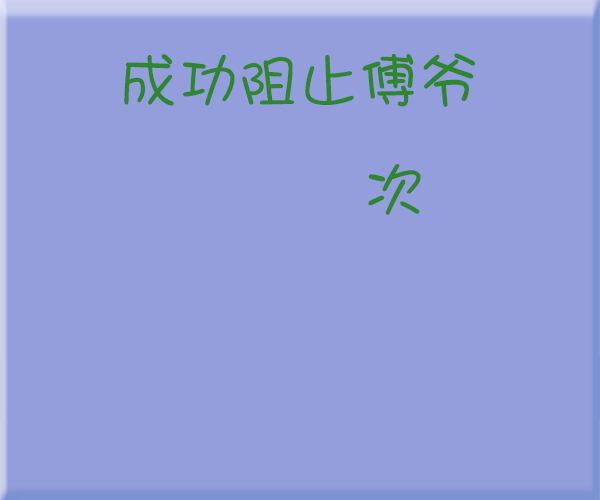
<style>
.page{position:relative;width:600px;height:500px;background:#949edc}
.page>*{position:absolute;margin:0}
.t1{font:60px "DroidSans";color:#308530}
</style>
<div class="page">
<p class="t1" style="left:124px;top:53px;width:351px;height:54px">成功阻止傅爷</p>
<p class="t1" style="left:368px;top:164px;width:53px;height:51px">次</p>
</div>
